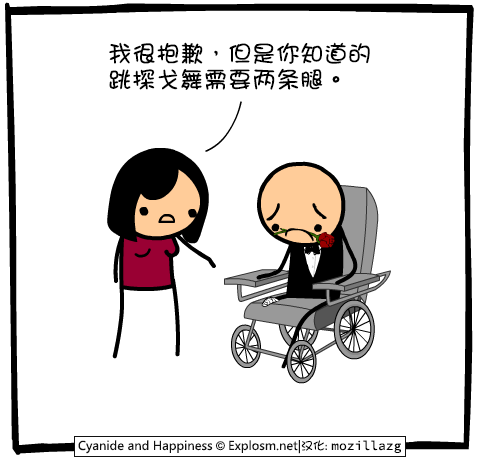
<style>
.page{position:relative;width:480px;height:460px;background:#ffffff}
.page>*{position:absolute;margin:0}
.t1{font:24px/26px "DFGirl";color:#000000}
</style>
<div class="page">
<p class="t1" style="left:109px;top:42px;width:261px;height:48px">我很抱歉，但是你知道的<br>跳探戈舞需要两条腿。</p>
</div>
